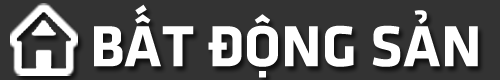
<style>
.page{position:relative;width:500px;height:80px;background:#333333}
.page>*{position:absolute;margin:0}
.t1{font:60px "UTMFacebookK&TBold";color:#ffffff;text-transform:uppercase}
</style>
<div class="page">
<p class="t1" style="left:94px;top:4px;width:384px;height:74px">bất động sản</p>
</div>
